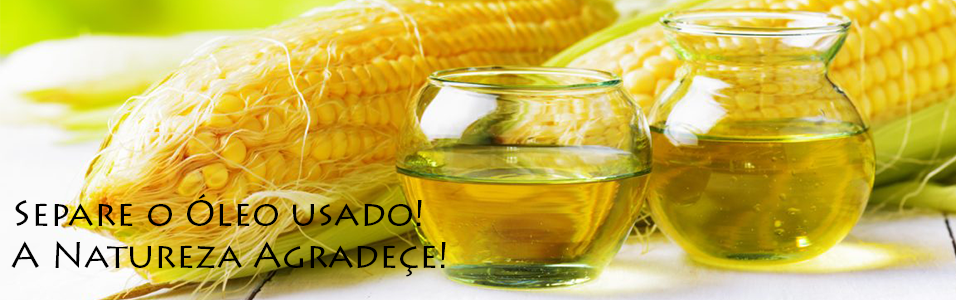
<style>
.page{position:relative;width:956px;height:300px}
.page>*{position:absolute;margin:0}
.t1{font:36px "LithosPro-Regular";color:#000000}
</style>
<div class="page">
<p class="t1" style="left:15px;top:193px;width:407px;height:33px">Separe o Óleo usado!</p>
<p class="t1" style="left:11px;top:240px;width:435px;height:37px">A Natureza Agradeçe!</p>
</div>
